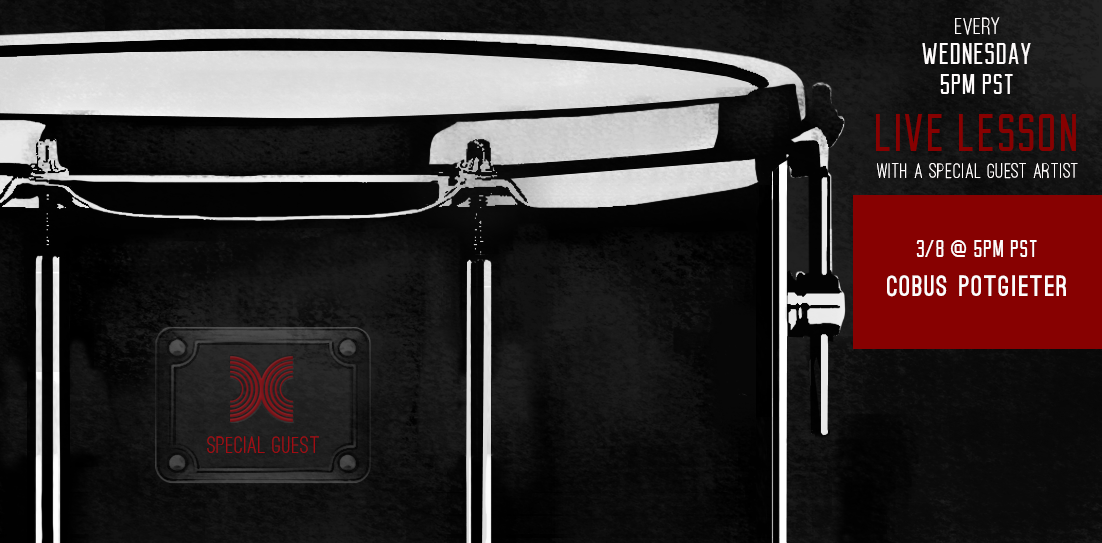
<style>
.page{position:relative;width:1102px;height:543px}
.page>*{position:absolute;margin:0}
.t1{font:30px/26.7px "Reckoner";letter-spacing:0.05em;color:#fefbfb}
.t2{font:24px/26.7px "OstrichSans-Medium";letter-spacing:0.05em;color:#fefbfb}
.t3{font:28px/26.7px "Reckoner";letter-spacing:0.05em;color:#fefbfb}
.t4{font:21.3px/23.7px "OstrichSans-Medium";letter-spacing:0.05em;color:#fefbfb}
.t5{font:53.3px/23.7px "Reckoner";letter-spacing:0.05em;color:#870101}
.t6{font:28px/36px "OstrichSans-Black";letter-spacing:0.05em;color:#fefbfb}
.t7{font:24.3px/24.9px "Reckoner";letter-spacing:0.05em;color:#fefbfb}
.t8{font:24px "OstrichSans-Medium";letter-spacing:0.05em;color:#a20c13}
</style>
<div class="page">
<p class="t1" style="left:922px;top:17px;width:109px;height:77px;text-align:center"><span class="t2">EVERY<br></span>WEDNESDAY<br><span class="t3">5PM PST</span></p>
<p class="t4" style="left:876px;top:114px;width:202px;height:65px;text-align:center"><span class="t5">LIVE LESSON<br></span>WITH A SPECIAL GUEST ARTIST</p>
<p class="t6" style="left:887px;top:240px;width:179px;height:57px;text-align:center"><span class="t7">3/8 @ 5Pm PST<br></span>Cobus Potgieter</p>
<p class="t8" style="left:207px;top:436px;width:112px;height:17px">SPECIAL GUEST</p>
</div>
